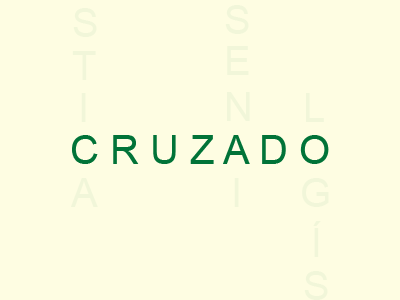
<style>
.page{position:relative;width:400px;height:300px;background:#fefde2}
.page>*{position:absolute;margin:0}
.t1{font:40px "ArialMT";color:#017338}
</style>
<div class="page">
<p class="t1" style="left:72px;top:135px;width:257px;height:29px">C R U Z A D O</p>
</div>
